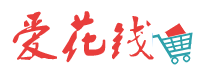
<style>
.page{position:relative;width:218px;height:76px;background:#ffffff}
.page>*{position:absolute;margin:0}
.t1{font:47.8px "2.0-";color:#e83d3b}
</style>
<div class="page">
<p class="t1" style="left:12px;top:11px;width:142px;height:52px">爱花钱</p>
</div>
